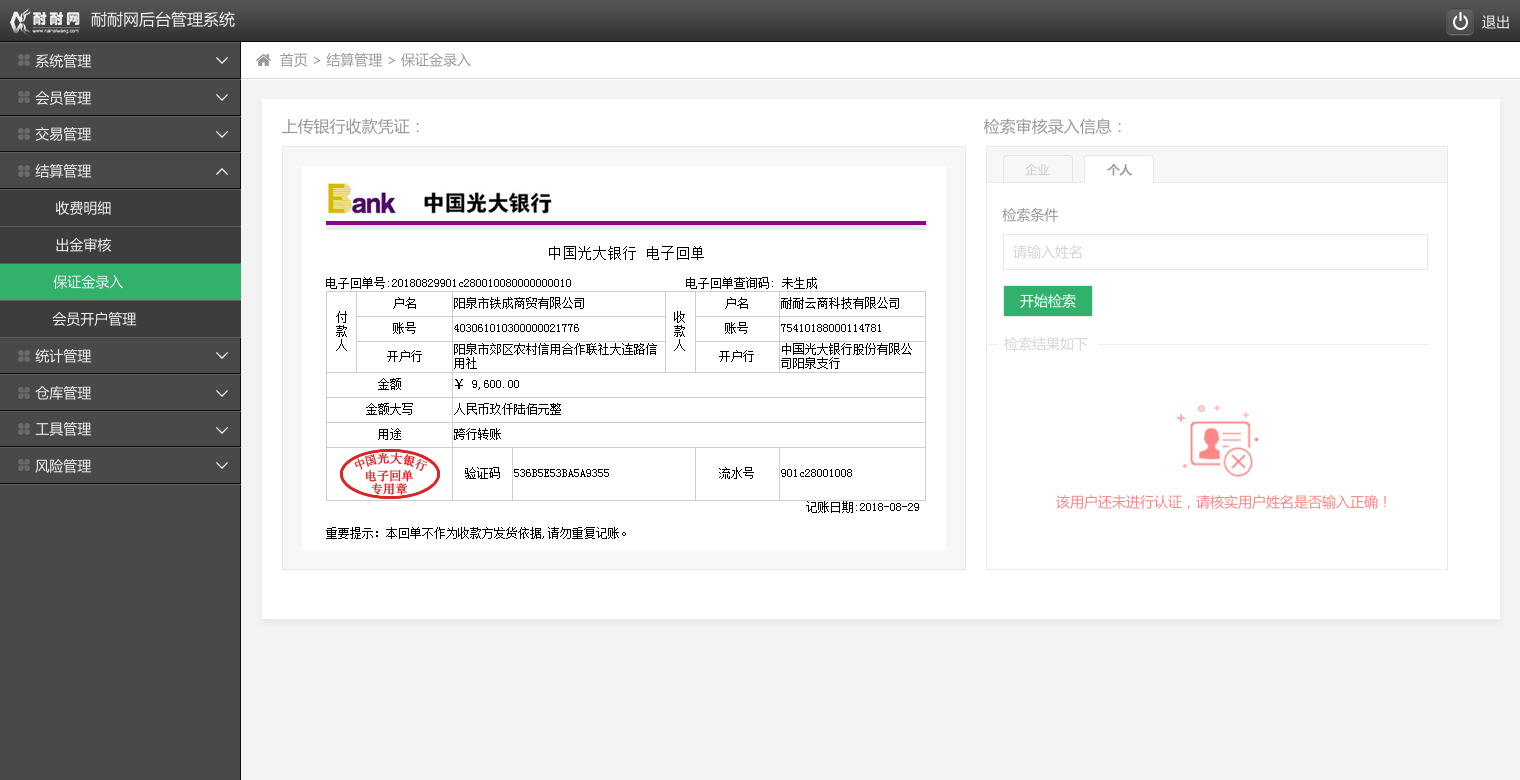
<style>
.page{position:relative;width:1520px;height:780px;background:#ffffff}
.page>*{position:absolute;margin:0}
.t1{font:16px "MicrosoftYaHei";color:#efefef}
.t2{font:14px "MicrosoftYaHei";color:#efefef}
.t3{font:14px "MicrosoftYaHei";color:#999999}
.t4{font:16px "MicrosoftYaHei";color:#999999}
.t5{font:12px "MicrosoftYaHei";color:#cccccc}
.t6{font:12px "MicrosoftYaHei";color:#999999;font-weight:bold}
.t7{font:14px "MicrosoftYaHei";color:#d6d6d6}
.t8{font:14px "MicrosoftYaHei";color:#fffcfc}
.t9{font:14px "MicrosoftYaHei";color:#fd8787}
</style>
<div class="page">
<p class="t1" style="left:91px;top:11px;width:144px;height:17px">耐耐网后台管理系统</p>
<p class="t2" style="left:1482px;top:15px;width:27px;height:14px">退出</p>
<p class="t2" style="left:35px;top:54px;width:57px;height:14px">系统管理</p>
<p class="t3" style="left:280px;top:53px;width:191px;height:14px">首页 &gt; 结算管理 &gt; 保证金录入</p>
<p class="t2" style="left:35px;top:91px;width:57px;height:14px">会员管理</p>
<p class="t4" style="left:282px;top:118px;width:137px;height:17px">上传银行收款凭证：</p>
<p class="t4" style="left:983px;top:118px;width:138px;height:17px">检索审核录入信息：</p>
<p class="t2" style="left:35px;top:127px;width:57px;height:14px">交易管理</p>
<p class="t2" style="left:35px;top:164px;width:57px;height:14px">结算管理</p>
<p class="t5" style="left:1025px;top:164px;width:25px;height:12px">企业</p>
<p class="t6" style="left:1107px;top:164px;width:25px;height:12px">个人</p>
<p class="t2" style="left:55px;top:201px;width:56px;height:14px">收费明细</p>
<p class="t3" style="left:1002px;top:208px;width:57px;height:14px">检索条件</p>
<p class="t2" style="left:56px;top:238px;width:56px;height:14px">出金审核</p>
<p class="t7" style="left:1013px;top:245px;width:69px;height:14px">请输入姓名</p>
<p class="t2" style="left:53px;top:275px;width:70px;height:14px">保证金录入</p>
<p class="t8" style="left:1020px;top:294px;width:56px;height:14px">开始检索</p>
<p class="t2" style="left:52px;top:312px;width:85px;height:14px">会员开户管理</p>
<p class="t7" style="left:1004px;top:337px;width:84px;height:14px">检索结果如下</p>
<p class="t2" style="left:35px;top:349px;width:57px;height:14px">统计管理</p>
<p class="t2" style="left:35px;top:386px;width:57px;height:14px">仓库管理</p>
<p class="t2" style="left:35px;top:422px;width:57px;height:14px">工具管理</p>
<p class="t2" style="left:35px;top:459px;width:57px;height:14px">风险管理</p>
<p class="t9" style="left:1056px;top:495px;width:330px;height:14px">该用户还未进行认证，请核实用户姓名是否输入正确！</p>
</div>
